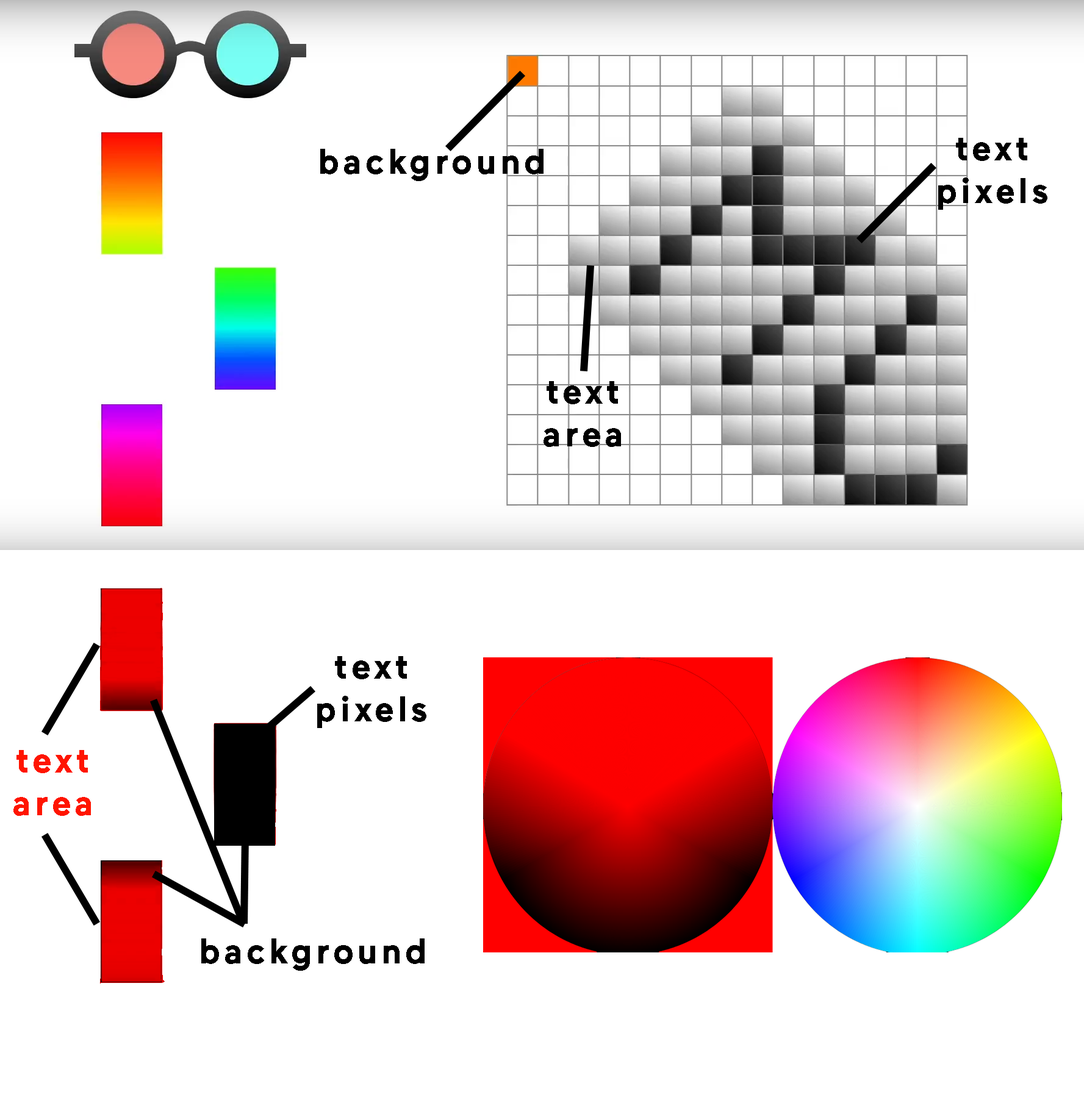
<style>
.page{position:relative;width:1084px;height:1100px;background:#ffffff}
.page>*{position:absolute;margin:0}
.t1{font:35.6px "Maax-Bold";letter-spacing:0.1em;color:#000000}
.t2{font:35.6px "Maax-Bold";letter-spacing:0.1em;color:#ff1500}
</style>
<div class="page">
<p class="t1" style="left:938px;top:138px;width:109px;height:72px;text-align:center">text<br>pixels</p>
<p class="t1" style="left:320px;top:149px;width:223px;height:32px">background</p>
<p class="t1" style="left:543px;top:381px;width:78px;height:66px;text-align:center">text<br>area</p>
<p class="t1" style="left:317px;top:656px;width:109px;height:72px;text-align:center">text<br>pixels</p>
<p class="t2" style="left:13px;top:750px;width:78px;height:66px;text-align:center">text<br>area</p>
<p class="t1" style="left:201px;top:939px;width:223px;height:32px">background</p>
</div>
